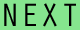
<style>
.page{position:relative;width:80px;height:30px;background:#85e58e}
.page>*{position:absolute;margin:0}
.t1{font:33.3px "OratorStd";color:#000000}
</style>
<div class="page">
<p class="t1" style="left:4px;top:3px;width:72px;height:24px">NEXT</p>
</div>
